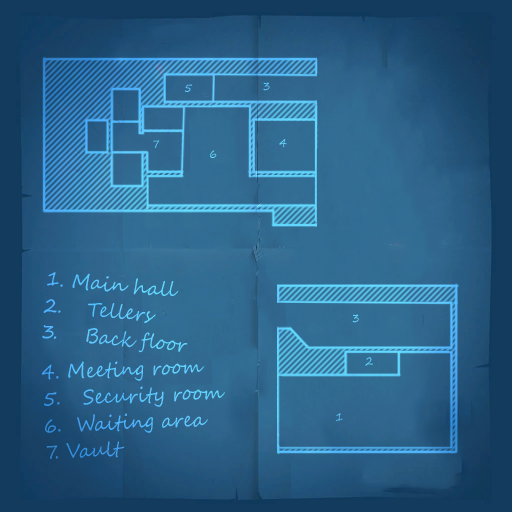
<style>
.page{position:relative;width:512px;height:512px}
.page>*{position:absolute;margin:0}
.t1{font:11.6px "SegoeScript";color:#5fcbff;scale:0.91 1}
.t2{font:11.6px "SegoeScript";color:#5ec8ff;scale:0.91 1}
.t3{font:11.6px "SegoeScript";scale:0.91 1}
.t4{font:11.6px "SegoeScript";color:#68dcff;scale:0.91 1}
.t5{font:11.6px "SegoeScript";color:#68d8ff;scale:0.91 1}
.t6{font:20.3px/26.6px "SegoeScript";color:#60caff;scale:0.91 1}
.t7{font:11.6px "SegoeScript";color:#62daff;scale:0.91 1}
.t8{font:20.3px/26.6px "SegoeScript";scale:0.91 1}
</style>
<div class="page">
<p class="t1" style="left:184px;top:84px;width:9px;height:8px">5</p>
<p class="t2" style="left:263px;top:82px;width:7px;height:9px">3</p>
<p class="t3" style="left:153px;top:140px;width:7px;height:8px">7</p>
<p class="t4" style="left:210px;top:150px;width:7px;height:8px">6</p>
<p class="t5" style="left:279px;top:139px;width:8px;height:9px">4</p>
<p class="t6" style="left:42px;top:272px;width:146px;height:81px;rotate:5deg">1. Main hall<br>2. Tellers<br>3. Back floor</p>
<p class="t7" style="left:352px;top:314px;width:7px;height:9px">3</p>
<p class="t8" style="left:41px;top:361px;width:184px;height:98px;rotate:-2deg">4. Meeting room<br>5.   Security room<br>6.  Waiting area<br>7. Vault</p>
<p class="t7" style="left:365px;top:357px;width:8px;height:9px">2</p>
<p class="t3" style="left:336px;top:413px;width:7px;height:8px">1</p>
</div>
